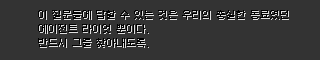
<style>
.page{position:relative;width:320px;height:60px;background:#333333}
.page>*{position:absolute;margin:0}
.t1{font:10px/14px "Galmuri9-Regular";color:#e0e0e0}
</style>
<div class="page">
<p class="t1" style="left:39px;top:11px;width:250px;height:37px">이 질문들에 답할 수 있는 것은 우리의 충실한 동료였던<br>에이전트 라이엇 뿐이다.<br>반드시 그를 찾아내도록.</p>
</div>
